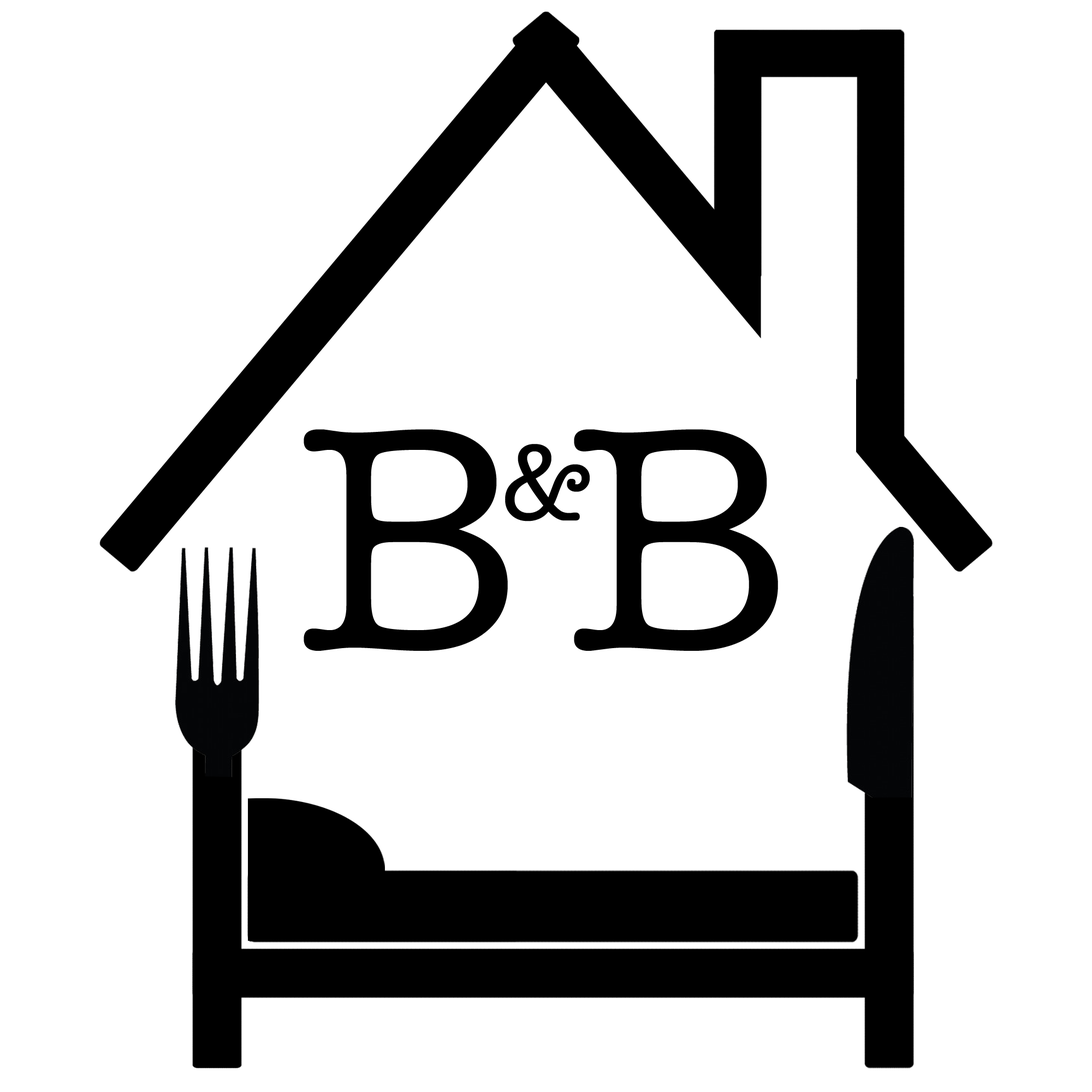
<style>
.page{position:relative;width:1092px;height:1092px;background:#ffffff}
.page>*{position:absolute;margin:0}
.t1{font:327.6px "AmericanTypewriter";color:#000000}
.t2{font:218.4px "AmericanTypewriter";color:#000000}
.t3{font:109.2px "AmericanTypewriter";color:#000000}
</style>
<div class="page">
<p class="t1" style="left:304px;top:429px;width:204px;height:222px"><span class="t2"><br></span>B</p>
<p class="t1" style="left:574px;top:429px;width:204px;height:222px"><span class="t2"><br></span>B</p>
<p class="t3" style="left:505px;top:444px;width:85px;height:77px">&amp;</p>
</div>
